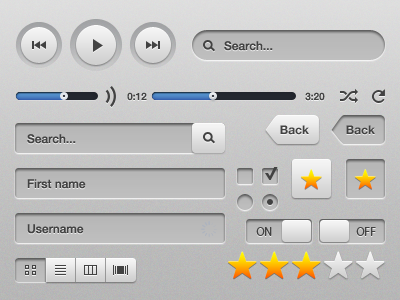
<style>
.page{position:relative;width:400px;height:300px}
.page>*{position:absolute;margin:0}
.t1{font:12px "HelveticaNeueLTCom-Md";color:#424242}
.t2{font:10px "HelveticaNeueLTCom-Md";color:#424242}
.t3{font:12px "HelveticaNeue-Bold";color:#424242}
.t4{font:12px "MyriadPro-Regular";color:#424242}
</style>
<div class="page">
<p class="t1" style="left:224px;top:41px;width:49px;height:10px">Search...</p>
<p class="t2" style="left:127px;top:92px;width:20px;height:9px">0:12</p>
<p class="t2" style="left:305px;top:92px;width:20px;height:9px">3:20</p>
<p class="t3" style="left:280px;top:125px;width:29px;height:10px">Back</p>
<p class="t3" style="left:346px;top:125px;width:29px;height:10px">Back</p>
<p class="t1" style="left:27px;top:134px;width:49px;height:10px">Search...</p>
<p class="t1" style="left:27px;top:179px;width:59px;height:10px">First name</p>
<p class="t1" style="left:27px;top:224px;width:57px;height:10px">Username</p>
<p class="t4" style="left:256px;top:227px;width:16px;height:9px">ON</p>
<p class="t4" style="left:356px;top:227px;width:20px;height:9px">OFF</p>
</div>
